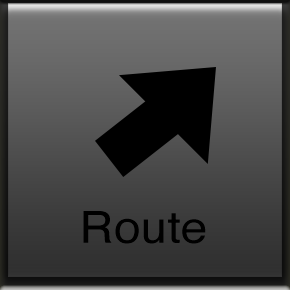
<style>
.page{position:relative;width:290px;height:290px}
.page>*{position:absolute;margin:0}
.t1{font:44px "Helvetica";color:#000000;scale:1.09 1}
</style>
<div class="page">
<p class="t1" style="left:83px;top:211px;width:123px;height:33px">Route</p>
</div>
